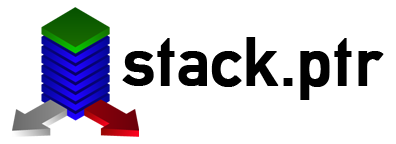
<style>
.page{position:relative;width:396px;height:144px;background:#ffffff}
.page>*{position:absolute;margin:0}
.t1{font:67.2px "AlteDIN1451Mittelschrift";color:#000000;font-weight:bold}
</style>
<div class="page">
<p class="t1" style="left:122px;top:37px;width:262px;height:63px">stack.ptr</p>
</div>
